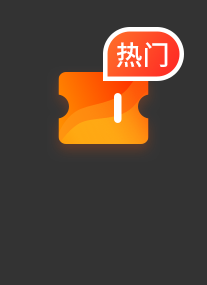
<style>
.page{position:relative;width:207px;height:285px;background:#333333}
.page>*{position:absolute;margin:0}
.t1{font:27px "SourceHanSansCN-Medium";color:#ffffff}
</style>
<div class="page">
<p class="t1" style="left:116px;top:42px;width:52px;height:26px">热门</p>
</div>
